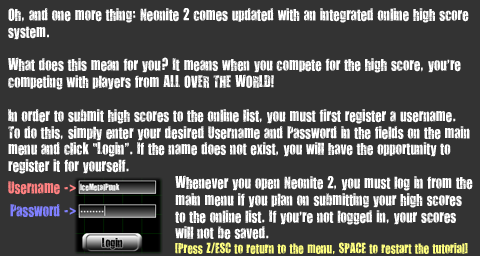
<style>
.page{position:relative;width:480px;height:256px;background:#333333}
.page>*{position:absolute;margin:0}
.t1{font:14px "YouAreLoved";color:#ffffff}
.t2{font:12px "YouAreLoved";color:#ffff80}
.t3{font:14px "YouAreLoved";color:#ff8080}
.t4{font:14px "YouAreLoved";color:#8080ff}
</style>
<div class="page">
<p class="t1" style="left:8px;top:8px;width:465px;height:247px">Oh, and one more thing: Neonite 2 comes updated with an integrated online high score<br>system.<br><br>What does this mean for you? It means when you compete for the high score, you’re<br>competing with players from ALL OVER THE WORLD!<br><br>In order to submit high scores to the online list, you must first register a username.<br>To do this, simply enter your desired Username and Password in the fields on the main<br>menu and click “Login”. If the name does not exist, you will have the opportunity to<br>register it for yourself.<br>                                           Whenever you open Neonite 2, you must log in from the<br>                                           main menu if you plan on submitting your high scores<br>                                           to the online list. If you’re not logged in, your scores<br>                                           will not be saved.  <br><span class="t2">                                                  [Press Z/ESC to return to the menu, SPACE to restart the tutorial]</span></p>
<p class="t3" style="left:8px;top:181px;width:68px;height:14px">Username -&gt;</p>
<p class="t4" style="left:10px;top:204px;width:66px;height:13px">Password -&gt;</p>
</div>
